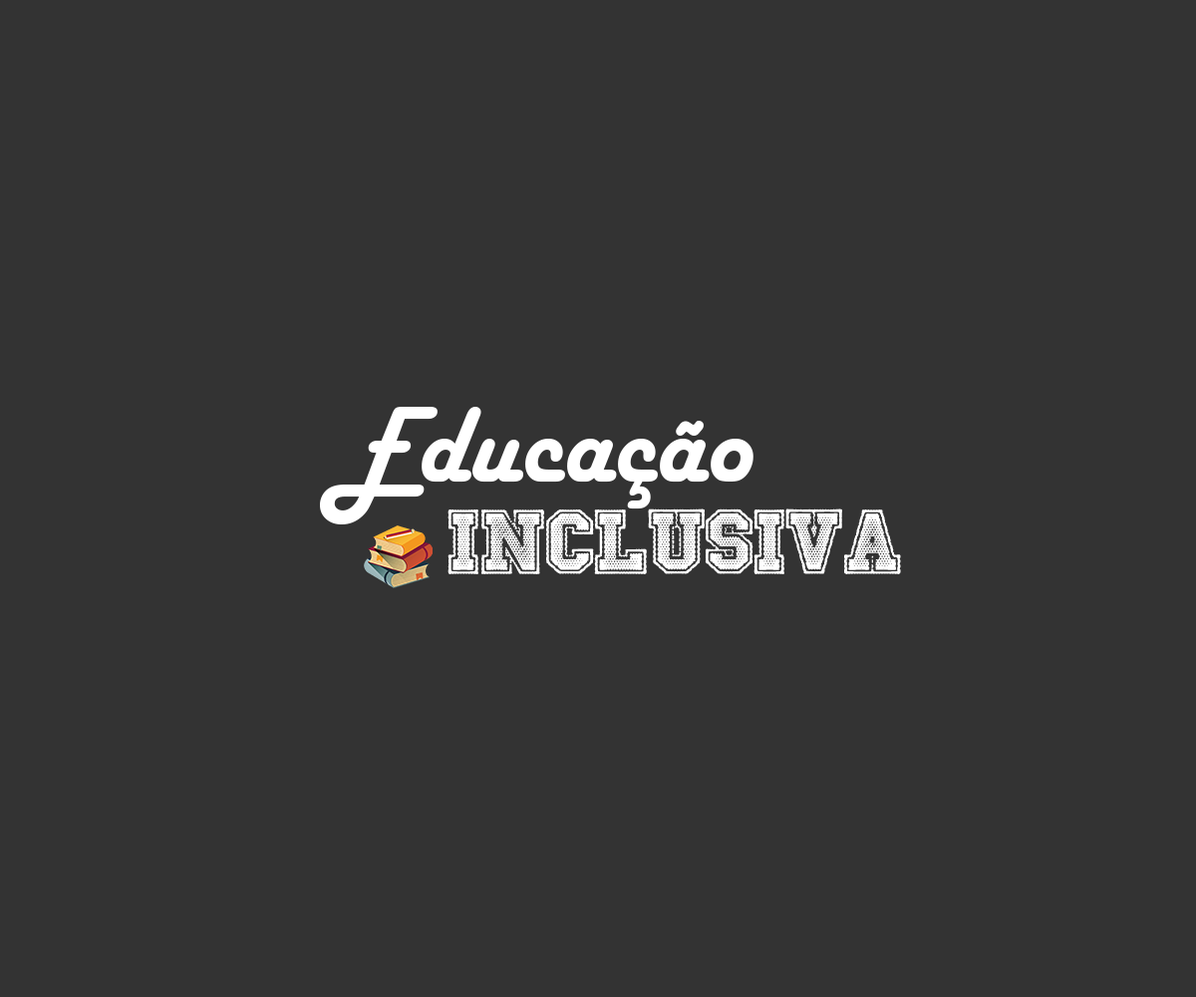
<style>
.page{position:relative;width:1196px;height:997px;background:#333333}
.page>*{position:absolute;margin:0}
.t1{font:111.3px "HarlowSolid";color:#ffffff}
.t2{font:83.9px "FridayNightLights";color:#ffffff;scale:1.07 1}
</style>
<div class="page">
<p class="t1" style="left:320px;top:407px;width:434px;height:117px">Educação</p>
<p class="t2" style="left:448px;top:508px;width:453px;height:66px">inclusiva</p>
</div>
